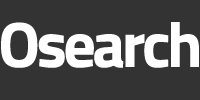
<style>
.page{position:relative;width:200px;height:100px;background:#333333}
.page>*{position:absolute;margin:0}
.t1{font:64.1px "Titillium-Bold";letter-spacing:-0.055em;color:#ffffff}
</style>
<div class="page">
<p class="t1" style="left:1px;top:22px;width:198px;height:46px">Osearch</p>
</div>
